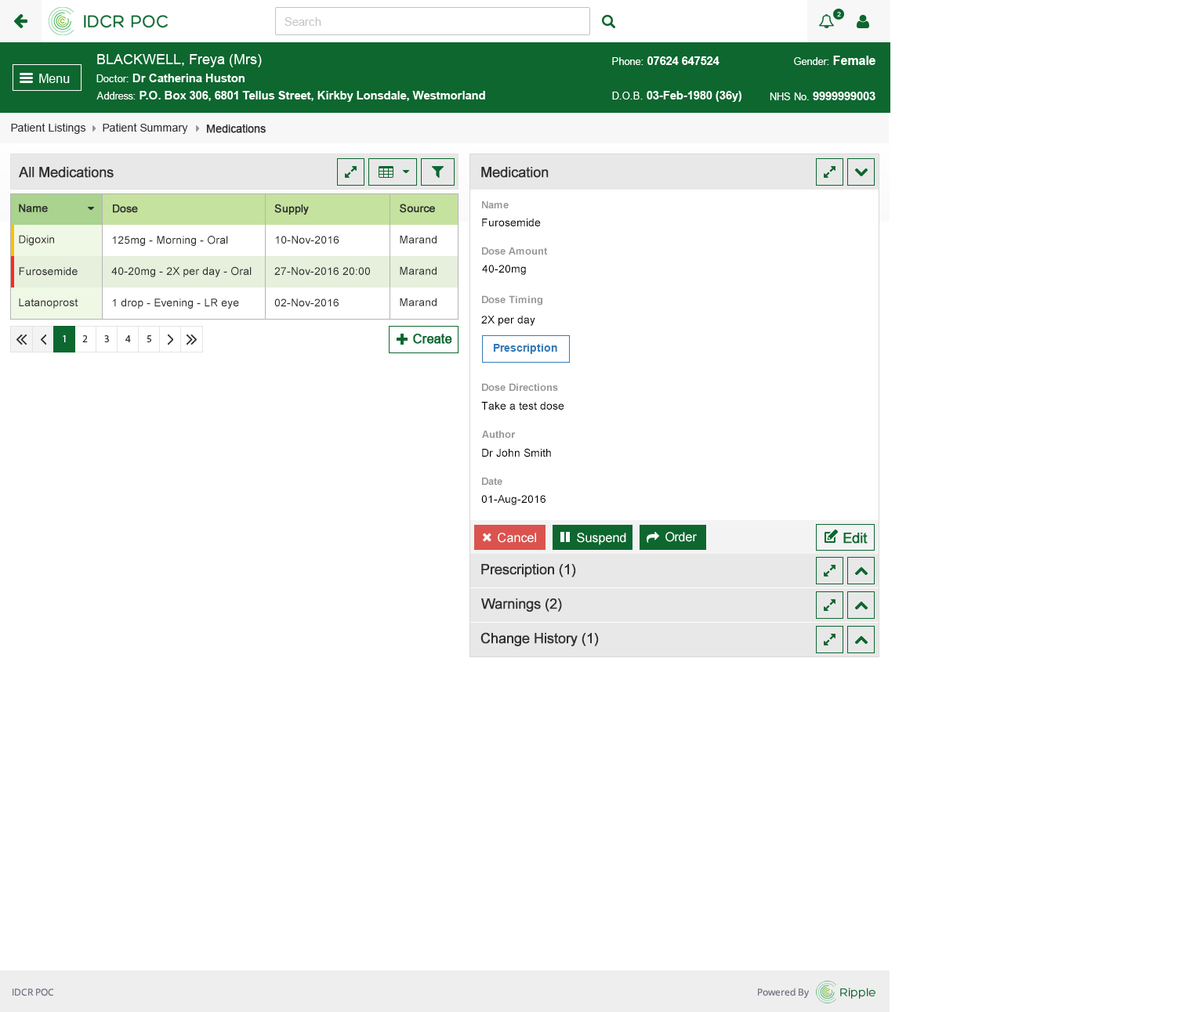
<style>
.page{position:relative;width:1178px;height:1012px;background:#ffffff}
.page>*{position:absolute;margin:0}
.t1{font:11px "ArialMT";color:#313131}
.t2{font:11px "ArialMT";color:#313131;font-weight:bold}
.t3{font:14.1px "ArialMT";color:#303030;font-weight:bold}
.t4{font:11px "ArialMT";color:#303030;font-weight:bold}
.t5{font:10.2px "Arial-BoldMT";color:#959595}
.t6{font:11px "ArialMT";color:#000000}
.t7{font:11px "ArialMT";color:#303030}
.t8{font:11px "Arial-BoldMT";color:#337ab7}
.t9{font:12.5px "ArialMT";color:#ffffff}
</style>
<div class="page">
<p class="t1" style="left:11px;top:123px;width:75px;height:11px">Patient Listings</p>
<p class="t1" style="left:103px;top:123px;width:85px;height:11px">Patient Summary</p>
<p class="t2" style="left:206px;top:124px;width:60px;height:9px">Medications</p>
<p class="t3" style="left:19px;top:167px;width:95px;height:11px">All Medications</p>
<p class="t3" style="left:481px;top:167px;width:68px;height:11px">Medication</p>
<p class="t4" style="left:19px;top:204px;width:29px;height:8px">Name</p>
<p class="t4" style="left:113px;top:205px;width:25px;height:8px">Dose</p>
<p class="t4" style="left:274px;top:204px;width:35px;height:11px">Supply</p>
<p class="t4" style="left:400px;top:204px;width:35px;height:9px">Source</p>
<p class="t5" style="left:482px;top:201px;width:27px;height:7px">Name</p>
<p class="t6" style="left:482px;top:219px;width:59px;height:7px">Furosemide</p>
<p class="t7" style="left:19px;top:235px;width:35px;height:11px">Digoxin</p>
<p class="t7" style="left:112px;top:236px;width:116px;height:10px">125mg - Morning - Oral</p>
<p class="t7" style="left:275px;top:236px;width:64px;height:8px">10-Nov-2016</p>
<p class="t7" style="left:400px;top:235px;width:36px;height:9px">Marand</p>
<p class="t5" style="left:482px;top:247px;width:66px;height:8px">Dose Amount</p>
<p class="t7" style="left:19px;top:267px;width:59px;height:9px">Furosemide</p>
<p class="t7" style="left:111px;top:266px;width:141px;height:11px">40-20mg - 2X per day - Oral</p>
<p class="t7" style="left:274px;top:267px;width:96px;height:8px">27-Nov-2016 20:00</p>
<p class="t7" style="left:400px;top:266px;width:36px;height:9px">Marand</p>
<p class="t6" style="left:482px;top:265px;width:44px;height:10px">40-20mg</p>
<p class="t7" style="left:19px;top:299px;width:59px;height:10px">Latanoprost</p>
<p class="t7" style="left:112px;top:299px;width:127px;height:10px">1 drop - Evening - LR eye</p>
<p class="t7" style="left:274px;top:299px;width:65px;height:8px">02-Nov-2016</p>
<p class="t7" style="left:400px;top:298px;width:36px;height:8px">Marand</p>
<p class="t5" style="left:482px;top:295px;width:60px;height:11px">Dose Timing</p>
<p class="t6" style="left:481px;top:316px;width:54px;height:10px">2X per day</p>
<p class="t8" style="left:493px;top:344px;width:64px;height:10px">Prescription</p>
<p class="t5" style="left:482px;top:383px;width:76px;height:8px">Dose Directions</p>
<p class="t6" style="left:481px;top:402px;width:83px;height:8px">Take a test dose</p>
<p class="t5" style="left:482px;top:430px;width:34px;height:8px">Author</p>
<p class="t6" style="left:482px;top:448px;width:69px;height:10px">Dr John Smith</p>
<p class="t5" style="left:482px;top:477px;width:20px;height:8px">Date</p>
<p class="t6" style="left:481px;top:495px;width:64px;height:10px">01-Aug-2016</p>
<p class="t9" style="left:498px;top:533px;width:38px;height:10px">Cancel</p>
<p class="t9" style="left:577px;top:533px;width:49px;height:12px">Suspend</p>
<p class="t9" style="left:665px;top:532px;width:32px;height:10px">Order</p>
<p class="t3" style="left:481px;top:564px;width:95px;height:14px">Prescription (1)</p>
<p class="t3" style="left:481px;top:599px;width:81px;height:13px">Warnings (2)</p>
<p class="t3" style="left:480px;top:632px;width:119px;height:14px">Change History (1)</p>
</div>
